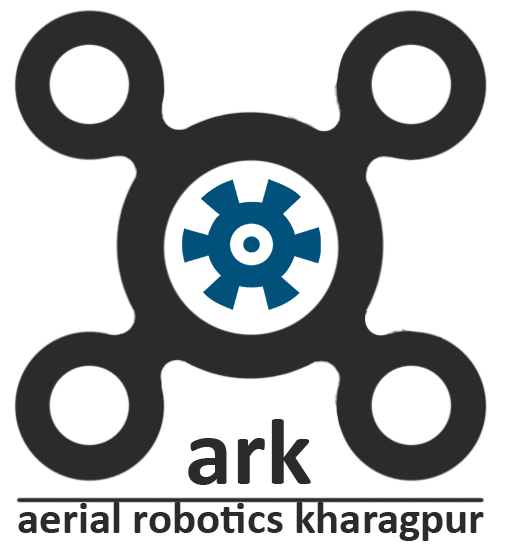
<style>
.page{position:relative;width:510px;height:554px;background:#ffffff}
.page>*{position:absolute;margin:0}
.t1{font:96px "Calibri-Bold";color:#2b2b2b}
.t2{font:45px "Calibri-Bold";color:#2b2b2b}
</style>
<div class="page">
<p class="t1" style="left:188px;top:419px;width:123px;height:66px">ark</p>
<p class="t2" style="left:18px;top:502px;width:466px;height:39px">aerial robotics kharagpur</p>
</div>
